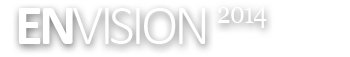
<style>
.page{position:relative;width:350px;height:57px;background:#ffffff}
.page>*{position:absolute;margin:0}
.t1{font:57.3px "Calibri-Light";letter-spacing:-0.075em;color:#ffffff;text-transform:uppercase}
.t2{font:57.3px "Calibri-Bold";letter-spacing:-0.075em;color:#ffffff;text-transform:uppercase}
.t3{font:30px "Georgia";letter-spacing:-0.025em;color:#ffffff;scale:0.8 1}
</style>
<div class="page">
<p class="t1" style="left:18px;top:8px;width:188px;height:36px"><span class="t2">En</span>vision</p>
<p class="t3" style="left:218px;top:7px;width:49px;height:21px">2014</p>
</div>
